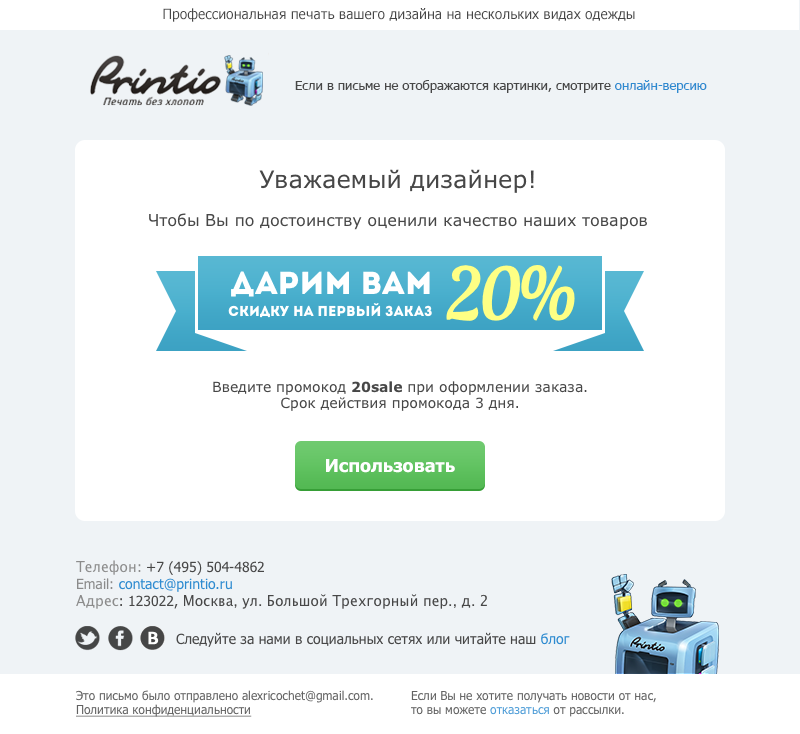
<style>
.page{position:relative;width:800px;height:734px;background:#ffffff}
.page>*{position:absolute;margin:0}
.t1{font:14px "Tahoma";color:#474747}
.t2{font:13px "Tahoma";color:#474747}
.t3{font:13px "Tahoma";color:#2e8bd0}
.t4{font:16px "Verdana";color:#474747}
.t5{font:24px "Verdana";color:#474747}
.t6{font:14px "Verdana";color:#474747}
.t7{font:14px "Verdana-Bold";color:#474747}
.t8{font:18px "Tahoma-Bold";color:#ffffff}
.t9{font:14px "LucidaGrande";color:#474747}
.t10{font:14px "LucidaGrande";color:#8c8c8c}
.t11{font:14px "Tahoma";color:#8c8c8c}
.t12{font:14px "Tahoma";color:#8b8b8b}
.t13{font:14px "Tahoma";color:#2e8bd0}
.t14{font:14px "LucidaGrande";color:#8b8b8b}
.t15{font:12px "Tahoma";color:#626262}
.t16{font:12px "Tahoma";color:#626262;text-decoration:underline}
</style>
<div class="page">
<p class="t1" style="left:163px;top:8px;width:472px;height:14px">Профессиональная печать вашего дизайна на нескольких видах одежды</p>
<p class="t2" style="left:295px;top:80px;width:412px;height:13px">Если в письме не отображаются картинки, смотрите <span class="t3">онлайн-версию</span></p>
<p class="t4" style="left:149px;top:169px;width:498px;height:61px;text-align:center"><span class="t5">Уважаемый дизайнер!<br></span><br>Чтобы Вы по достоинству оценили качество наших товаров</p>
<p class="t6" style="left:213px;top:381px;width:374px;height:30px;text-align:center">Введите промокод <span class="t7">20sale</span> при оформлении заказа.<br>Срок действия промокода 3 дня.</p>
<p class="t8" style="left:326px;top:459px;width:129px;height:14px">Использовать</p>
<p class="t9" style="left:76px;top:560px;width:411px;height:49px"><span class="t10">Телефон</span><span class="t11">:</span><span class="t1"> +7 (495) 504-4862<br></span><span class="t12">Email: </span><span class="t13">contact@printio.ru<br></span><span class="t14">Адрес</span><span class="t1">: 123022, </span>Москва, ул. Большой Трехгорный пер., д. 2</p>
<p class="t1" style="left:176px;top:632px;width:394px;height:15px">Следуйте за нами в социальных сетях или читайте наш <span class="t13">блог</span></p>
<p class="t15" style="left:76px;top:690px;width:297px;height:27px;text-align:right">Это письмо было отправлено alexricochet@gmail.com.<br><span class="t16">Политика конфиденциальности</span></p>
<p class="t15" style="left:411px;top:691px;width:245px;height:26px;text-align:right">Если Вы не хотите получать новости от нас,<br>то вы можете отказаться от рассылки.</p>
</div>
